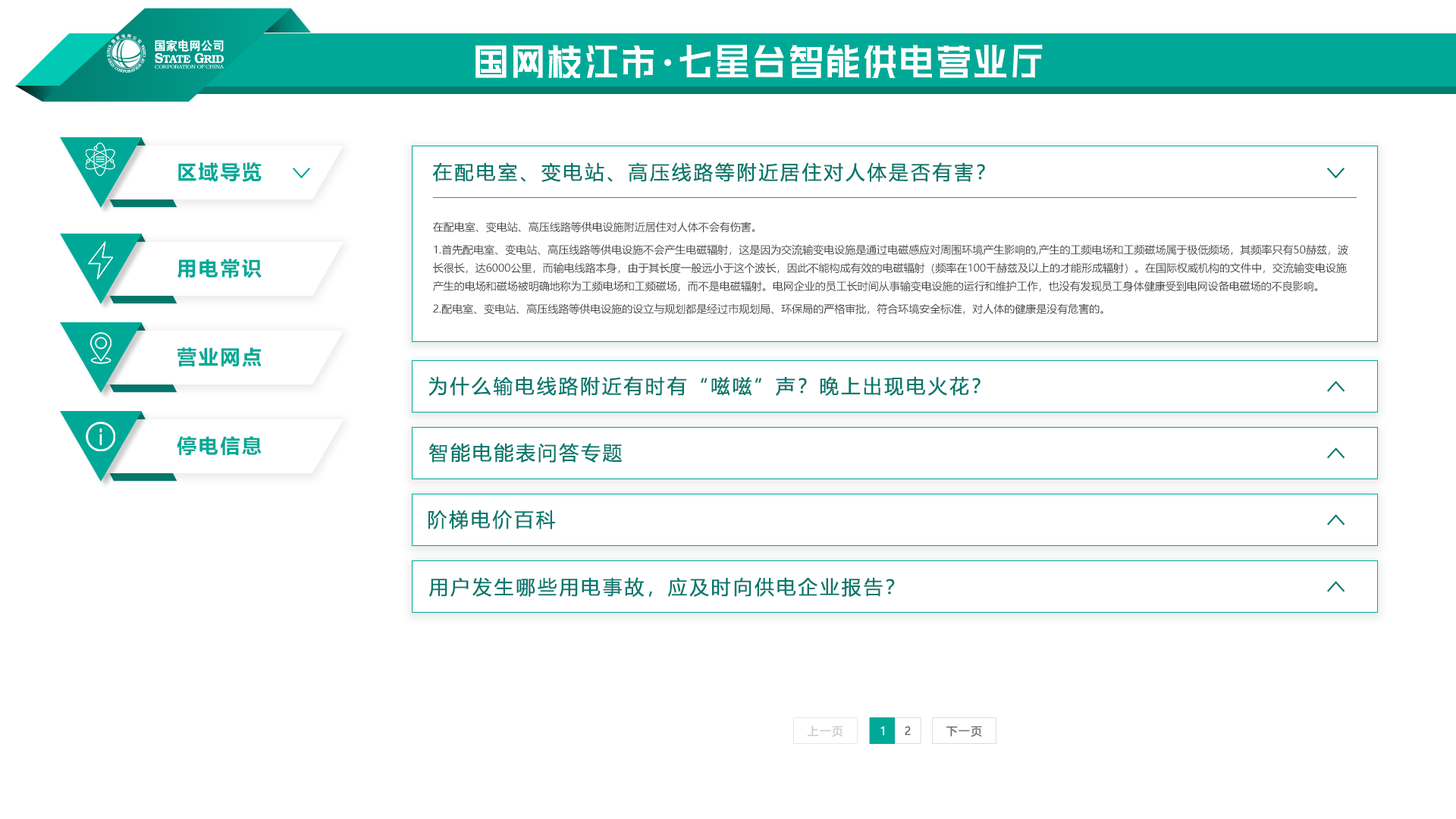
<style>
.page{position:relative;width:1456px;height:819px;background:#ffffff}
.page>*{position:absolute;margin:0}
.t1{font:54.7px "HuXiaoBoKuHei";letter-spacing:0.1em;color:#ffffff;scale:0.61 1}
.t2{font:19.7px "MicrosoftYaHei-Bold";letter-spacing:0.1em;color:#00a997}
.t3{font:19.3px "MicrosoftYaHei";letter-spacing:0.1em;color:#04786d;font-weight:bold}
.t4{font:10.6px/18.2px "MicrosoftYaHei";color:#454545}
.t5{font:10.6px/22.7px "MicrosoftYaHei";color:#454545}
.t6{font:11px "MicrosoftYaHei";letter-spacing:0.1em;color:#cacaca;font-weight:bold}
.t7{font:11px "MicrosoftYaHei";letter-spacing:0.1em;color:#ffffff;font-weight:bold}
.t8{font:11px "MicrosoftYaHei";letter-spacing:0.1em;color:#6c6a6a;font-weight:bold}
</style>
<div class="page">
<p class="t1" style="left:475px;top:45px;width:568px;height:34px">国网枝江市 七星台智能供电营业厅</p>
<p class="t2" style="left:178px;top:162px;width:84px;height:20px">区域导览</p>
<p class="t3" style="left:432px;top:162px;width:553px;height:20px">在配电室、变电站、高压线路等附近居住对人体是否有害？</p>
<p class="t4" style="left:433px;top:221px;width:915px;height:94px"><span class="t5">在配电室、变电站、高压线路等供电设施附近居住对人体不会有伤害。<br>1.首先配电室、变电站、高压线路等供电设施不会产生电磁辐射，这是因为交流输变电设施是通过电磁感应对周围环境产生影响的,产生的工频电场和工频磁场属于极低频场，其频率只有50赫兹，</span>波<br>长很长，达6000公里，而输电线路本身，由于其长度一般远小于这个波长，因此不能构成有效的电磁辐射（频率在100千赫兹及以上的才能形成辐射）。在国际权威机构的文件中，交流输变电设施<br>产生的电场和磁场被明确地称为工频电场和工频磁场，而不是电磁辐射。电网企业的员工长时间从事输变电设施的运行和维护工作，也没有发现员工身体健康受到电网设备电磁场的不良影响。<br><span class="t5">2.配电室、变电站、高压线路等供电设施的设立与规划都是经过市规划局、环保局的严格审批，符合环境安全标准，对人体的健康是没有危害的。</span></p>
<p class="t2" style="left:177px;top:259px;width:85px;height:19px">用电常识</p>
<p class="t2" style="left:177px;top:347px;width:85px;height:20px">营业网点</p>
<p class="t3" style="left:428px;top:376px;width:553px;height:20px">为什么输电线路附近有时有“嗞嗞”声？晚上出现电火花？</p>
<p class="t2" style="left:177px;top:436px;width:85px;height:20px">停电信息</p>
<p class="t3" style="left:428px;top:443px;width:194px;height:20px">智能电能表问答专题</p>
<p class="t3" style="left:428px;top:510px;width:127px;height:19px">阶梯电价百科</p>
<p class="t3" style="left:429px;top:577px;width:466px;height:21px">用户发生哪些用电事故，应及时向供电企业报告？</p>
<p class="t6" style="left:808px;top:726px;width:35px;height:11px">上一页</p>
<p class="t7" style="left:880px;top:726px;width:4px;height:10px">1</p>
<p class="t8" style="left:905px;top:726px;width:6px;height:10px">2</p>
<p class="t8" style="left:946px;top:726px;width:36px;height:11px">下一页</p>
</div>
